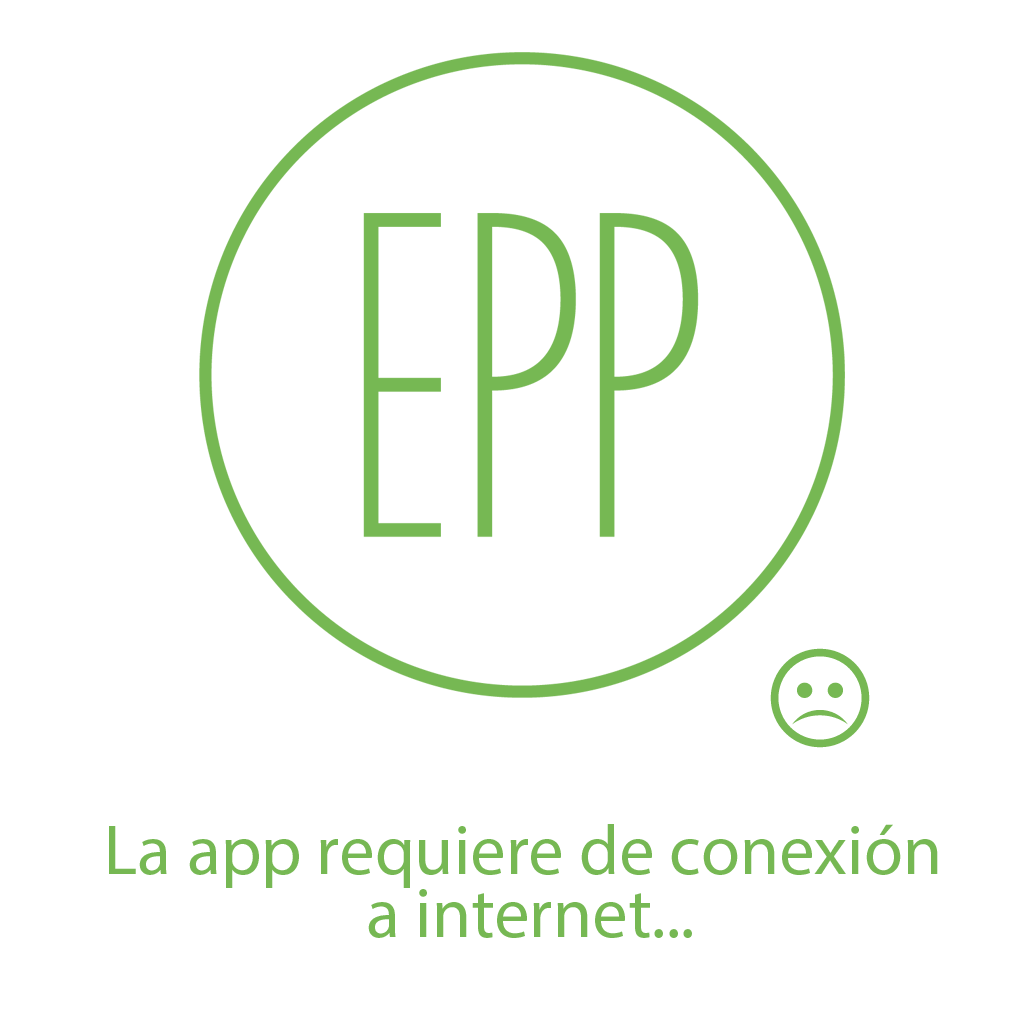
<style>
.page{position:relative;width:1024px;height:1024px;background:#ffffff}
.page>*{position:absolute;margin:0}
.t1{font:70.9px/63px "MyriadPro-Regular";color:#76b853}
</style>
<div class="page">
<p class="t1" style="left:109px;top:824px;width:829px;height:114px;text-align:center">La app requiere de conexión <br>a internet...</p>
</div>
